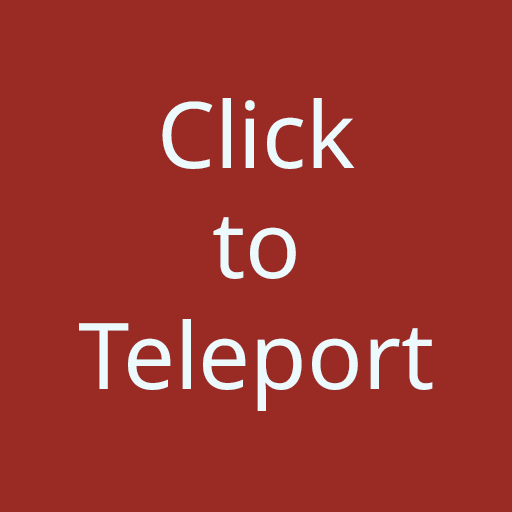
<style>
.page{position:relative;width:512px;height:512px;background:#9a2a24}
.page>*{position:absolute;margin:0}
.t1{font:92px "NotoSans-Regular";color:#edfafd}
</style>
<div class="page">
<p class="t1" style="left:79px;top:98px;width:354px;height:313px;text-align:center">Click<br>to<br>Teleport</p>
</div>
